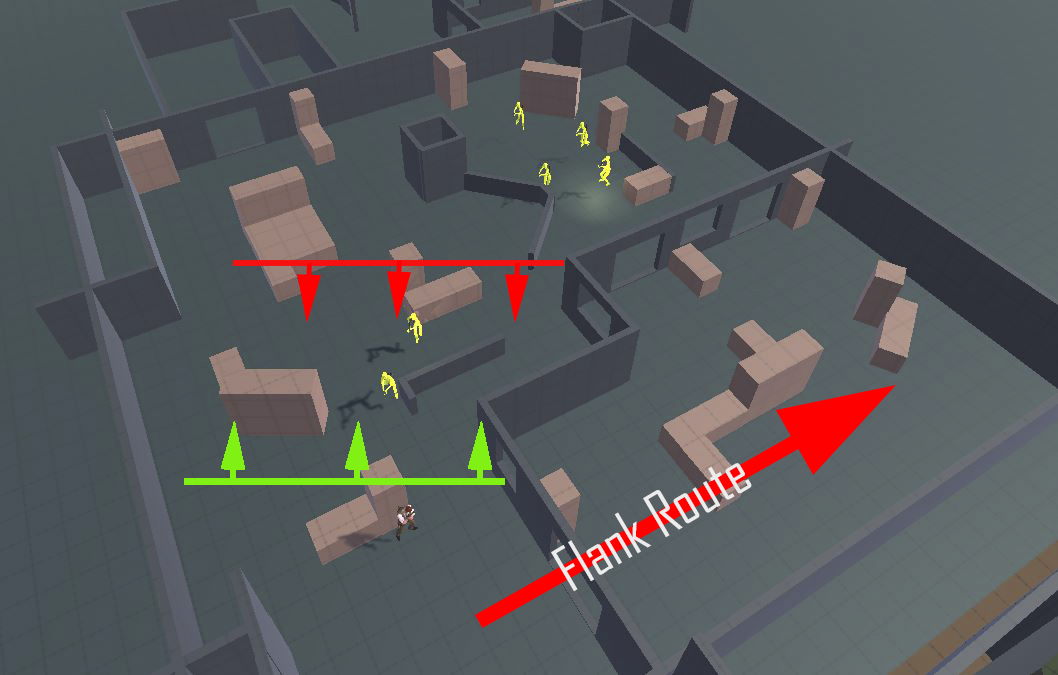
<style>
.page{position:relative;width:1058px;height:675px}
.page>*{position:absolute;margin:0}
.t1{font:59.2px "AgencyFB-Reg";color:#ececec}
</style>
<div class="page">
<p class="t1" style="left:551px;top:463px;width:201px;height:129px;rotate:-31deg">Flank Route</p>
</div>
